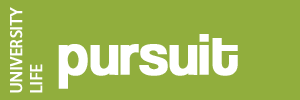
<style>
.page{position:relative;width:300px;height:100px;background:#91ae3d}
.page>*{position:absolute;margin:0}
.t1{font:16.7px "MyriadPro-Regular";color:#ffffff;font-weight:bold}
.t2{font:58.3px "CoolveticaRg-Regular";color:#ffffff;font-weight:bold}
</style>
<div class="page">
<p class="t1" style="left:10px;top:7px;width:33px;height:86px;rotate:-90deg">UNIVERSITY<br>LIFE</p>
<p class="t2" style="left:58px;top:34px;width:180px;height:55px">pursuit</p>
</div>
